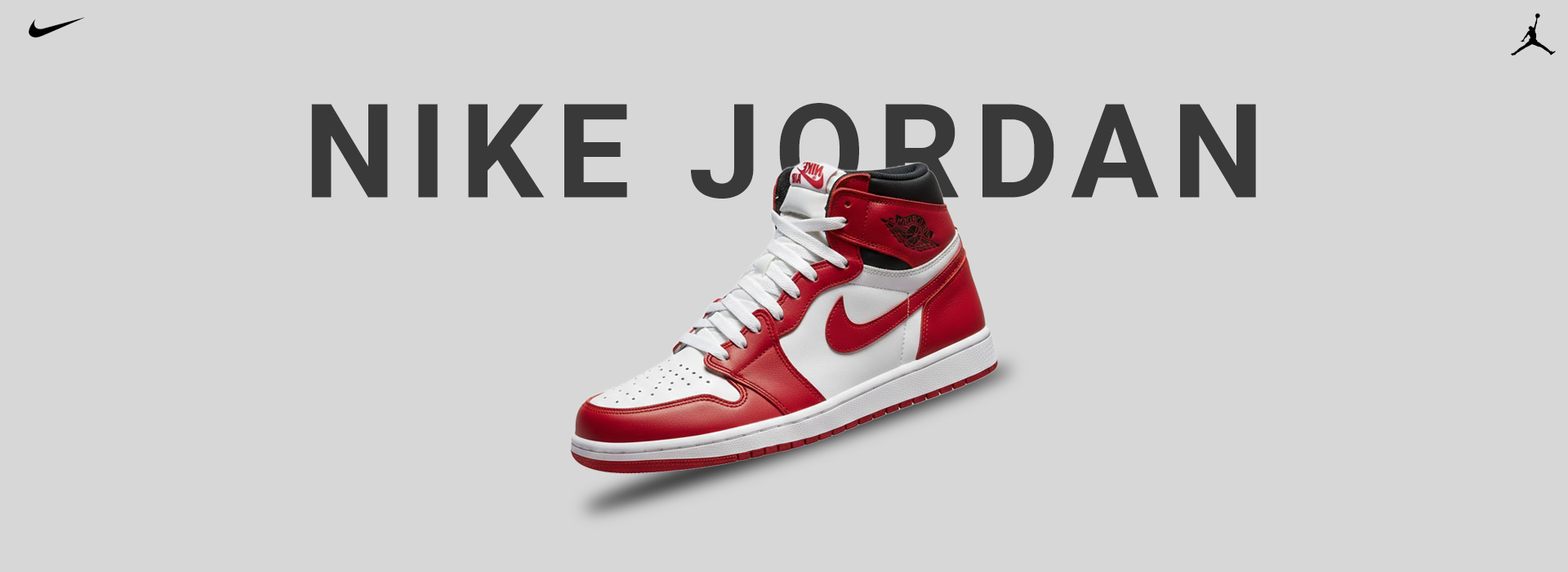
<style>
.page{position:relative;width:1568px;height:572px;background:#d7d7d7}
.page>*{position:absolute;margin:0}
.t1{font:130.7px "Roboto-Bold";letter-spacing:0.1em;color:#393939}
</style>
<div class="page">
<p class="t1" style="left:311px;top:103px;width:945px;height:95px">NIKE JORDAN</p>
</div>
